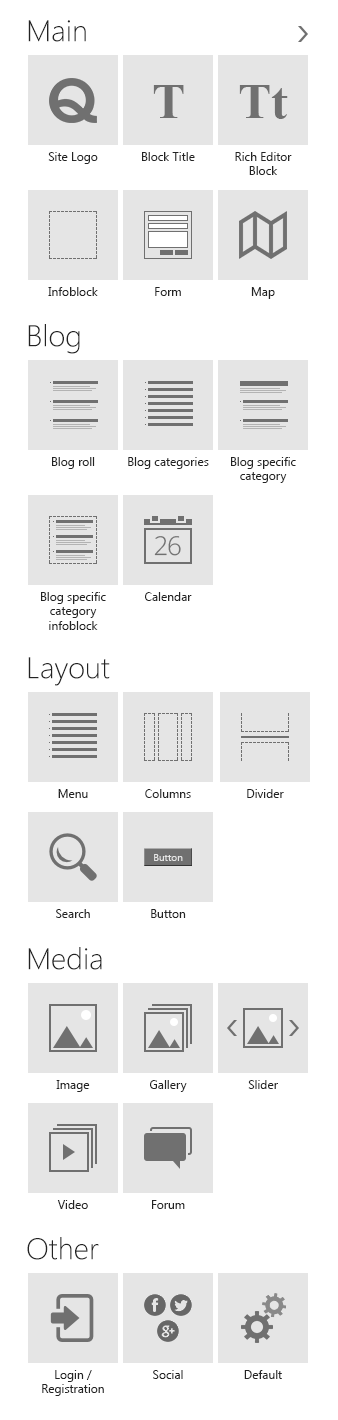
<style>
.page{position:relative;width:338px;height:1420px;background:#ffffff}
.page>*{position:absolute;margin:0}
.t1{font:30px "SegoeUI-Light";color:#232323}
.t2{font:50px "TimesNewRomanPS-BoldMT";color:#707070}
.t3{font:12px "SegoeUI";color:#232323}
.t4{font:26px "OpenSans-Light";letter-spacing:-0.04em;color:#707070}
.t5{font:10px "SegoeUI";color:#e5e5e5}
</style>
<div class="page">
<p class="t1" style="left:28px;top:20px;width:58px;height:22px">Main</p>
<p class="t2" style="left:153px;top:85px;width:31px;height:33px">T</p>
<p class="t2" style="left:239px;top:85px;width:49px;height:34px">Tt</p>
<p class="t3" style="left:48px;top:152px;width:50px;height:12px">Site Logo</p>
<p class="t3" style="left:142px;top:152px;width:53px;height:9px">Block Title</p>
<p class="t3" style="left:235px;top:152px;width:57px;height:23px;text-align:center">Rich Editor<br>Block</p>
<p class="t3" style="left:48px;top:287px;width:50px;height:9px">Infoblock</p>
<p class="t3" style="left:155px;top:287px;width:26px;height:9px">Form</p>
<p class="t3" style="left:251px;top:287px;width:24px;height:12px">Map</p>
<p class="t1" style="left:28px;top:324px;width:52px;height:30px">Blog</p>
<p class="t3" style="left:52px;top:457px;width:43px;height:12px">Blog roll</p>
<p class="t3" style="left:128px;top:457px;width:81px;height:12px">Blog categories</p>
<p class="t3" style="left:231px;top:457px;width:65px;height:26px;text-align:center">Blog specific category</p>
<p class="t4" style="left:154px;top:536px;width:27px;height:20px">26</p>
<p class="t3" style="left:41px;top:592px;width:65px;height:38px;text-align:center">Blog specific category infoblock</p>
<p class="t3" style="left:145px;top:592px;width:47px;height:9px">Calendar</p>
<p class="t1" style="left:28px;top:657px;width:82px;height:29px">Layout</p>
<p class="t3" style="left:58px;top:789px;width:30px;height:9px">Menu</p>
<p class="t3" style="left:145px;top:789px;width:46px;height:9px">Columns</p>
<p class="t3" style="left:247px;top:789px;width:37px;height:9px">Divider</p>
<p class="t5" style="left:154px;top:854px;width:29px;height:7px">Button</p>
<p class="t3" style="left:56px;top:909px;width:34px;height:9px">Search</p>
<p class="t3" style="left:151px;top:909px;width:35px;height:9px">Button</p>
<p class="t1" style="left:28px;top:947px;width:74px;height:23px">Media</p>
<p class="t3" style="left:56px;top:1080px;width:34px;height:12px">Image</p>
<p class="t3" style="left:150px;top:1080px;width:37px;height:12px">Gallery</p>
<p class="t3" style="left:248px;top:1080px;width:30px;height:9px">Slider</p>
<p class="t3" style="left:57px;top:1200px;width:31px;height:9px">Video</p>
<p class="t3" style="left:152px;top:1200px;width:33px;height:9px">Forum</p>
<p class="t1" style="left:27px;top:1237px;width:72px;height:23px">Other</p>
<p class="t3" style="left:42px;top:1370px;width:62px;height:26px;text-align:center">Login / Registration</p>
<p class="t3" style="left:153px;top:1370px;width:30px;height:9px">Social</p>
<p class="t3" style="left:244px;top:1370px;width:38px;height:9px">Default</p>
</div>
